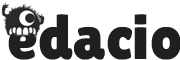
<style>
.page{position:relative;width:180px;height:60px;background:#ffffff}
.page>*{position:absolute;margin:0}
.t1{font:63px "LilitaOne";color:#1e1f1f}
</style>
<div class="page">
<p class="t1" style="left:8px;top:14px;width:172px;height:46px">edacio</p>
</div>
